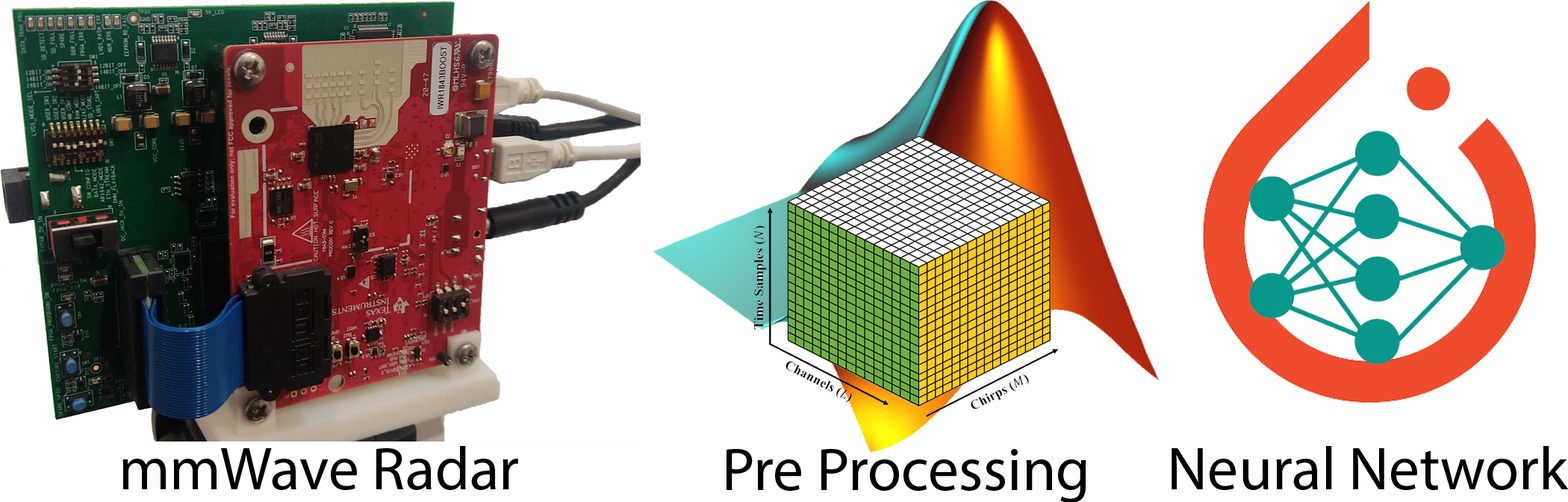
<style>
.page{position:relative;width:1568px;height:502px;background:#ffffff}
.page>*{position:absolute;margin:0}
.t1{font:61.2px "MyriadPro-Regular";color:#000000}
</style>
<div class="page">
<p class="t1" style="left:122px;top:446px;width:396px;height:44px">mmWave Radar</p>
<p class="t1" style="left:727px;top:449px;width:359px;height:54px">Pre Processing</p>
<p class="t1" style="left:1172px;top:446px;width:397px;height:44px">Neural Network</p>
</div>
